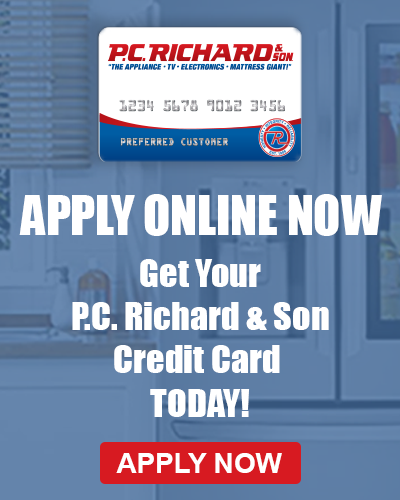
<style>
.page{position:relative;width:400px;height:500px}
.page>*{position:absolute;margin:0}
.t1{font:49.6px "Impact";color:#ffffff}
.t2{font:36.1px "Impact";color:#ffffff}
.t3{font:27.8px "Arial-BoldMT";color:#ffffff}
</style>
<div class="page">
<p class="t1" style="left:19px;top:194px;width:363px;height:42px">APPLY ONLINE NOW</p>
<p class="t2" style="left:72px;top:259px;width:257px;height:158px;text-align:center">Get Your<br>P.C. Richard &amp; Son<br>Credit Card <br>TODAY!</p>
<p class="t3" style="left:116px;top:453px;width:166px;height:20px">APPLY NOW</p>
</div>
